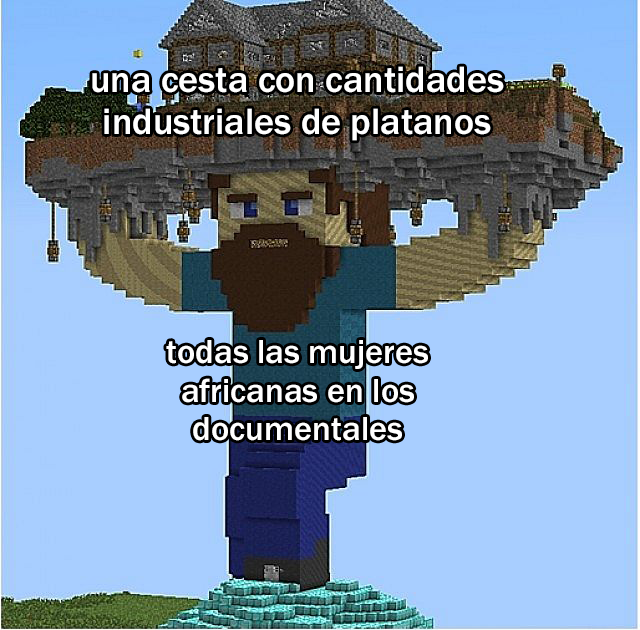
<style>
.page{position:relative;width:640px;height:630px;background:#a8ceff}
.page>*{position:absolute;margin:0}
.t1{font:37.9px "FranklinGothic-Medium";color:#ffffff}
.t2{font:34.5px "FranklinGothic-Medium";color:#ffffff}
</style>
<div class="page">
<p class="t1" style="left:92px;top:66px;width:412px;height:75px;text-align:center">una cesta con cantidades<br>industriales de platanos</p>
<p class="t2" style="left:166px;top:340px;width:262px;height:101px;text-align:center">todas las mujeres<br>africanas en los<br>documentales</p>
</div>
